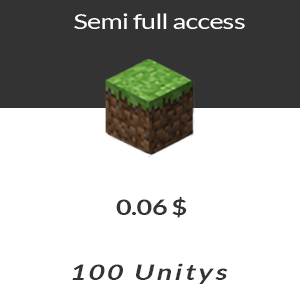
<style>
.page{position:relative;width:300px;height:304px;background:#ffffff}
.page>*{position:absolute;margin:0}
.t1{font:21.3px "Lato-Regular";letter-spacing:-0.025em;color:#ffffff;scale:1.26 1}
.t2{font:21.6px "Lato-Bold";letter-spacing:-0.025em;color:#333333;scale:1.26 1}
.t3{font:21.6px "Lato-Bold";letter-spacing:0.1em;color:#333333;font-style:italic;scale:1.26 1}
</style>
<div class="page">
<p class="t1" style="left:74px;top:13px;width:171px;height:16px">Semi full access</p>
<p class="t2" style="left:116px;top:197px;width:71px;height:21px">0.06 $</p>
<p class="t3" style="left:72px;top:263px;width:156px;height:21px">100 Unitys</p>
</div>
